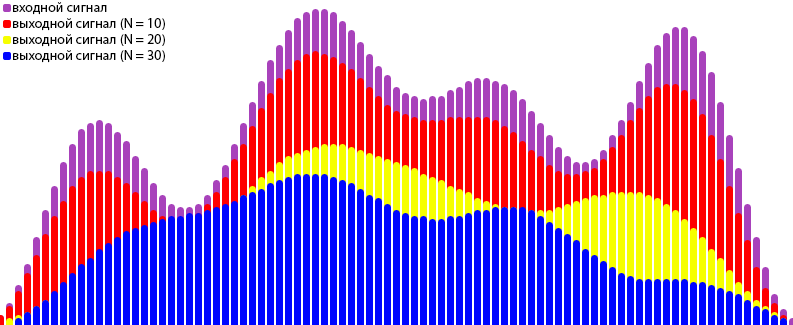
<style>
.page{position:relative;width:793px;height:325px;background:#ffffff}
.page>*{position:absolute;margin:0}
.t1{font:14px "MyriadPro-Regular";color:#000000}
</style>
<div class="page">
<p class="t1" style="left:13px;top:2px;width:94px;height:13px">входной сигнал</p>
<p class="t1" style="left:13px;top:18px;width:152px;height:13px">выходной сигнал (N = 10)</p>
<p class="t1" style="left:13px;top:34px;width:152px;height:13px">выходной сигнал (N = 20)</p>
<p class="t1" style="left:13px;top:50px;width:152px;height:13px">выходной сигнал (N = 30)</p>
</div>
